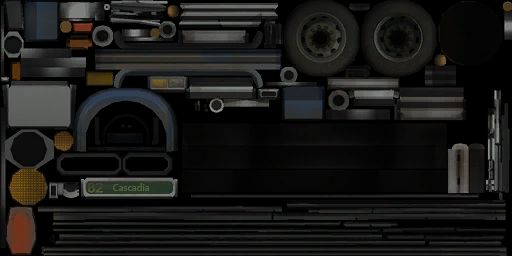
<style>
.page{position:relative;width:512px;height:256px}
.page>*{position:absolute;margin:0}
.t1{font:10px "MyriadPro-Regular";color:#55623c}
</style>
<div class="page">
<p class="t1" style="left:113px;top:183px;width:36px;height:8px">Cascadia</p>
</div>
